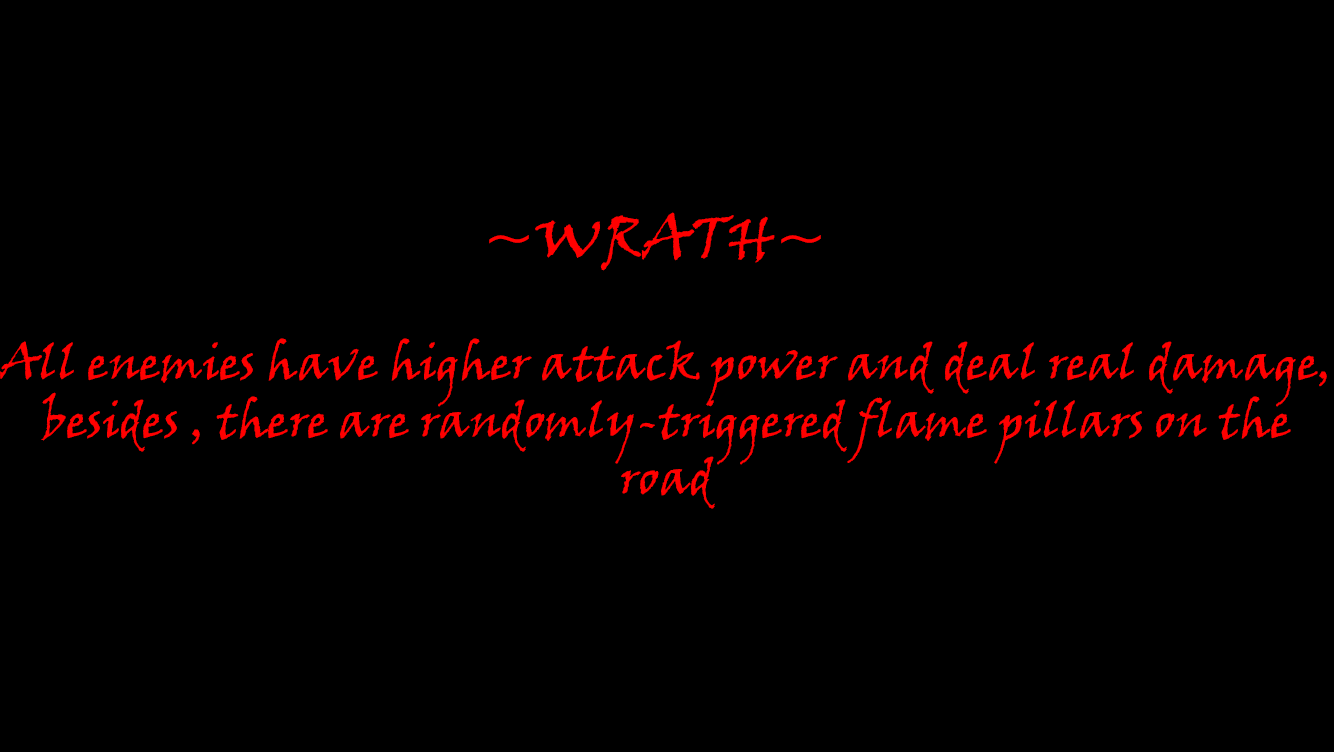
<style>
.page{position:relative;width:1334px;height:752px;background:#000000}
.page>*{position:absolute;margin:0}
.t1{font:60px "VinerHandITC";color:#ff0000}
.t2{font:48px "VinerHandITC";color:#ff0000}
</style>
<div class="page">
<p class="t1" style="left:489px;top:212px;width:332px;height:59px">~WRATH~</p>
<p class="t2" style="left:0px;top:338px;width:1327px;height:171px;text-align:center">All enemies have higher attack power and deal real damage, besides , there are randomly-triggered flame pillars on the road</p>
</div>
